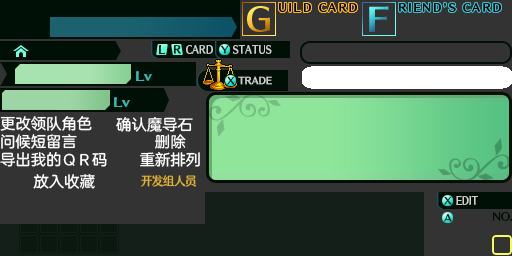
<style>
.page{position:relative;width:512px;height:256px;background:#333333}
.page>*{position:absolute;margin:0}
.t1{font:16px/18.7px "HYZhengYuan-FES";letter-spacing:-0.04em;color:#ffffff}
.t2{font:16px/17.3px "HYZhengYuan-FES";letter-spacing:-0.04em;color:#ffffff}
.t3{font:16px "HYZhengYuan-FES";letter-spacing:-0.04em;color:#ffffff}
.t4{font:12px "FZFW-QingYinTiS-B--GB1-0";letter-spacing:-0.04em;color:#e1b233;scale:0.96 1}
</style>
<div class="page">
<p class="t1" style="left:0px;top:116px;width:107px;height:51px"><span class="t2">更改领队角色<br></span>问候短留言<br>导出我的ＱＲ码</p>
<p class="t3" style="left:116px;top:117px;width:77px;height:15px">确认魔导石</p>
<p class="t3" style="left:155px;top:134px;width:31px;height:15px">删除</p>
<p class="t3" style="left:140px;top:152px;width:60px;height:15px">重新排列</p>
<p class="t3" style="left:33px;top:174px;width:62px;height:15px">放入收藏</p>
<p class="t4" style="left:141px;top:175px;width:55px;height:12px">开发组人员</p>
</div>
